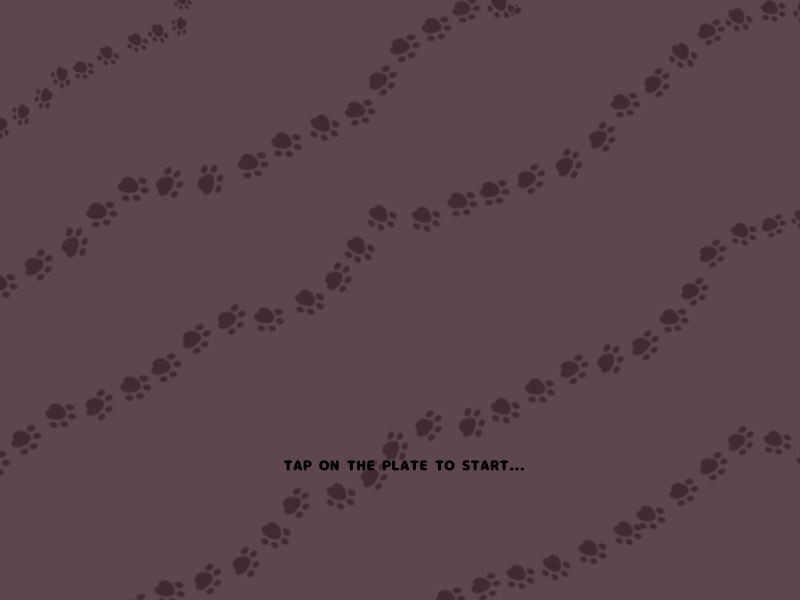
<style>
.page{position:relative;width:800px;height:600px;background:#5d464e}
.page>*{position:absolute;margin:0}
.t1{font:14px "07NikumaruFont";color:#000000}
</style>
<div class="page">
<p class="t1" style="left:284px;top:460px;width:240px;height:11px">TAP ON THE PLATE TO START...</p>
</div>
